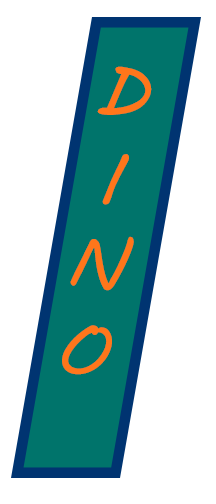
<style>
.page{position:relative;width:216px;height:504px;background:#ffffff}
.page>*{position:absolute;margin:0}
.t1{font:72px "MVBoli";color:#ff761b}
</style>
<div class="page">
<p class="t1" style="left:62px;top:66px;width:90px;height:309px;text-align:center;rotate:9deg">D<br>I<br>N<br>O</p>
</div>
